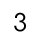
<style>
.page{position:relative;width:42px;height:45px;background:#ffffff}
.page>*{position:absolute;margin:0}
.t1{font:24px "Atlanta-Book";letter-spacing:0.1em;color:#000000}
</style>
<div class="page">
<p class="t1" style="left:13px;top:10px;width:16px;height:27px">3</p>
</div>
